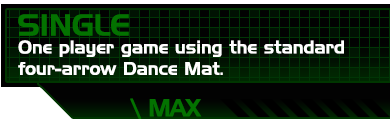
<style>
.page{position:relative;width:390px;height:126px;background:#020202}
.page>*{position:absolute;margin:0}
.t1{font:29.6px "HandelGothicBT-Regular";color:#037200}
.t2{font:17.8px "HandelGothicBT-Regular";color:#ffffff}
.t3{font:23.7px "HandelGothicBT-Regular";letter-spacing:-0.05em;color:#037200}
.t4{font:23.7px "HandelGothicBT-Regular";letter-spacing:-0.05em;color:#037200;font-weight:bold}
</style>
<div class="page">
<p class="t1" style="left:18px;top:14px;width:111px;height:22px">SINGLE</p>
<p class="t2" style="left:18px;top:40px;width:326px;height:35px">One player game using the standard<br>four-arrow Dance Mat.</p>
<p class="t3" style="left:130px;top:98px;width:72px;height:21px"><span class="t4">\</span> MAX</p>
</div>
